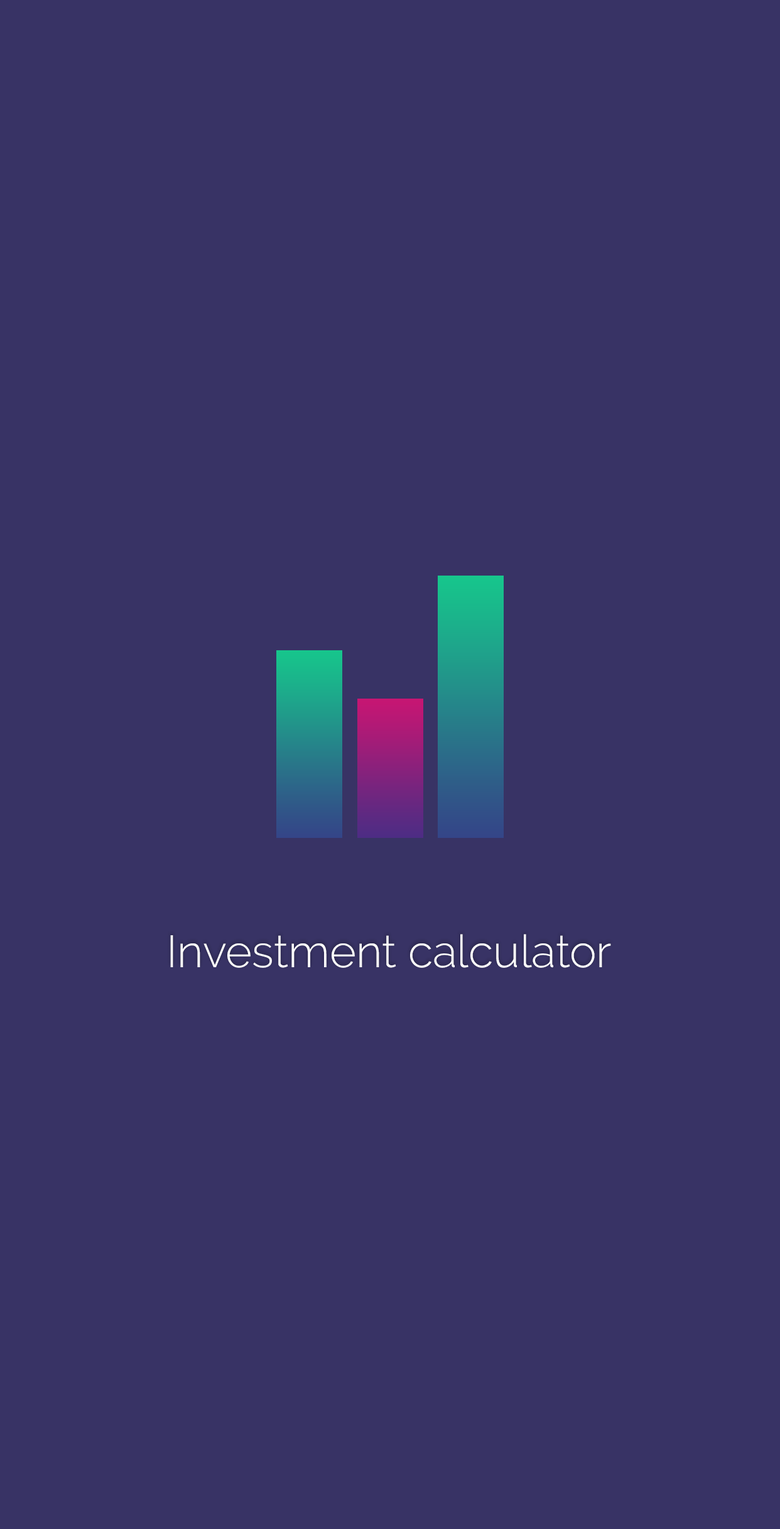
<style>
.page{position:relative;width:780px;height:1529px;background:#383365}
.page>*{position:absolute;margin:0}
.t1{font:45.2px "Raleway-Light";color:#fefefe}
</style>
<div class="page">
<p class="t1" style="left:170px;top:934px;width:441px;height:34px">Investment calculator</p>
</div>
